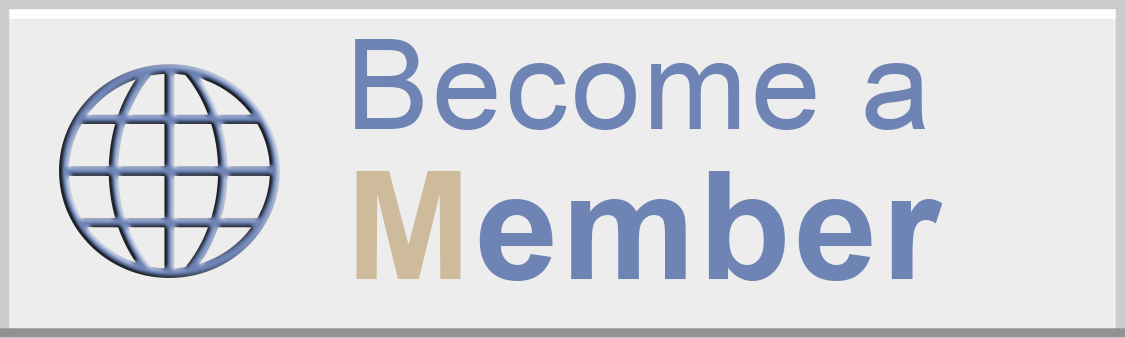
<style>
.page{position:relative;width:1125px;height:338px;background:#ededed}
.page>*{position:absolute;margin:0}
.t1{font:125px/116.7px "ArialMT";letter-spacing:0.025em;color:#6e84b5}
.t2{font:150px/150px "Arial-BoldMT";letter-spacing:0.025em;color:#cebb9b}
.t3{font:150px/150px "Arial-BoldMT";letter-spacing:0.025em;color:#6e84b5}
</style>
<div class="page">
<p class="t1" style="left:355px;top:39px;width:588px;height:242px">Become a<br><span class="t2">M</span><span class="t3">ember</span></p>
</div>
